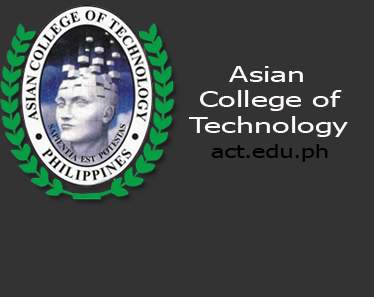
<style>
.page{position:relative;width:374px;height:297px;background:#333333}
.page>*{position:absolute;margin:0}
.t1{font:21.1px "Tahoma";color:#fcf8f8;scale:1.53 1}
.t2{font:18px "Tahoma";color:#000000;scale:1.4 1}
</style>
<div class="page">
<p class="t1" style="left:189px;top:66px;width:159px;height:71px">Asian<br> College of<br>Technology</p>
<p class="t2" style="left:211px;top:144px;width:117px;height:18px">act.edu.ph</p>
</div>
